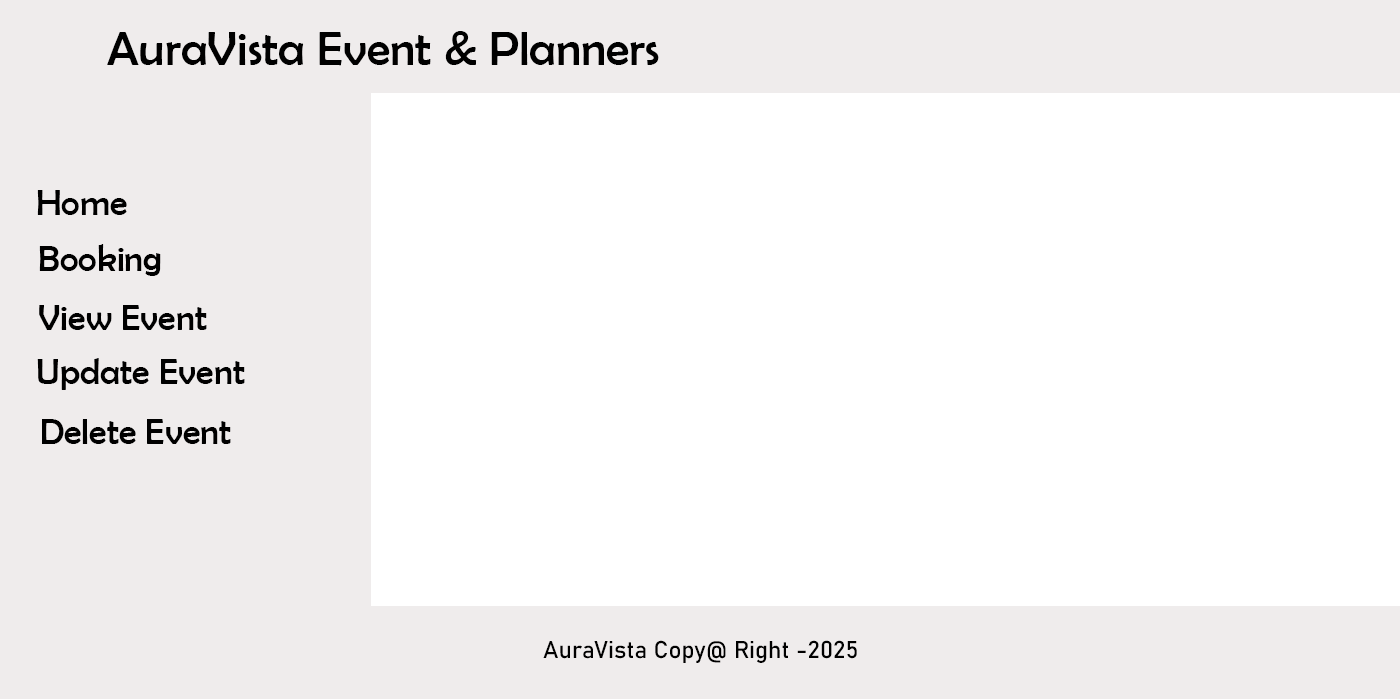
<style>
.page{position:relative;width:1400px;height:700px;background:#ffffff}
.page>*{position:absolute;margin:0}
.t1{font:48px "BerlinSansFB-Reg";color:#000000}
.t2{font:36px "BerlinSansFB-Reg";color:#000000}
.t3{font:24px "Bahnschrift";color:#000000}
</style>
<div class="page">
<p class="t1" style="left:107px;top:31px;width:552px;height:35px">AuraVista Event &amp; Planners</p>
<p class="t2" style="left:37px;top:190px;width:90px;height:25px">Home</p>
<p class="t2" style="left:39px;top:244px;width:122px;height:32px">Booking</p>
<p class="t2" style="left:39px;top:305px;width:168px;height:25px">View Event</p>
<p class="t2" style="left:37px;top:358px;width:208px;height:32px">Update Event</p>
<p class="t2" style="left:42px;top:419px;width:189px;height:25px">Delete Event</p>
<p class="t3" style="left:543px;top:640px;width:314px;height:23px">AuraVista Copy@ Right -2025</p>
</div>
